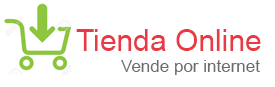
<style>
.page{position:relative;width:275px;height:87px;background:#ffffff}
.page>*{position:absolute;margin:0}
.t1{font:30px "ArialMT";color:#e83944}
.t2{font:17px "ArialMT";color:#6c6c6c}
</style>
<div class="page">
<p class="t1" style="left:76px;top:29px;width:185px;height:22px">Tienda Online</p>
<p class="t2" style="left:121px;top:60px;width:139px;height:15px">Vende por internet</p>
</div>
